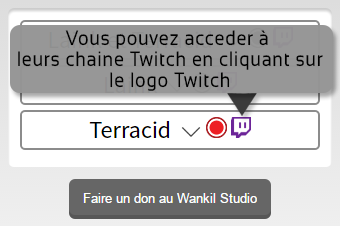
<style>
.page{position:relative;width:340px;height:226px;background:#ffffff}
.page>*{position:absolute;margin:0}
.t1{font:20.7px/21px "Sansation-Regular";letter-spacing:0.04em;color:#000000;scale:0.87 1}
</style>
<div class="page">
<p class="t1" style="left:18px;top:30px;width:305px;height:61px;text-align:center">Vous pouvez acceder à <br>leurs chaine Twitch en cliquant sur<br>le logo Twitch</p>
</div>
